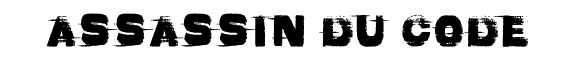
<style>
.page{position:relative;width:567px;height:57px;background:#ffffff}
.page>*{position:absolute;margin:0}
.t1{font:58.7px "BadComa";letter-spacing:0.1em;color:#000000;scale:0.67 1}
</style>
<div class="page">
<p class="t1" style="left:47px;top:13px;width:481px;height:34px">ASSASSIN DU CODE</p>
</div>
